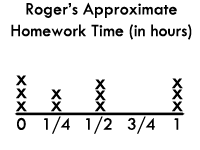
<style>
.page{position:relative;width:200px;height:150px;background:#ffffff}
.page>*{position:absolute;margin:0}
.t1{font:18px "TwCenMT-Regular";color:#000000}
.t2{font:24px "TwCenMT-Regular";color:#000000}
</style>
<div class="page">
<p class="t1" style="left:11px;top:2px;width:181px;height:38px;text-align:center">Roger’s Approximate <br>Homework Time (in hours)</p>
<p class="t2" style="left:16px;top:75px;width:11px;height:11px">x</p>
<p class="t2" style="left:172px;top:78px;width:11px;height:11px">x</p>
<p class="t2" style="left:16px;top:88px;width:11px;height:11px">x</p>
<p class="t2" style="left:51px;top:89px;width:11px;height:11px">x</p>
<p class="t2" style="left:95px;top:79px;width:11px;height:11px">x</p>
<p class="t2" style="left:172px;top:89px;width:11px;height:11px">x</p>
<p class="t2" style="left:16px;top:101px;width:11px;height:11px">x</p>
<p class="t2" style="left:51px;top:101px;width:11px;height:11px">x</p>
<p class="t2" style="left:95px;top:90px;width:11px;height:11px">x</p>
<p class="t2" style="left:95px;top:101px;width:11px;height:11px">x</p>
<p class="t2" style="left:172px;top:101px;width:11px;height:11px">x</p>
<p class="t1" style="left:17px;top:117px;width:9px;height:13px">0</p>
<p class="t1" style="left:44px;top:116px;width:26px;height:18px">1/4</p>
<p class="t1" style="left:86px;top:116px;width:26px;height:18px">1/2</p>
<p class="t1" style="left:127px;top:116px;width:28px;height:18px">3/4</p>
<p class="t1" style="left:174px;top:118px;width:5px;height:12px">1</p>
</div>
